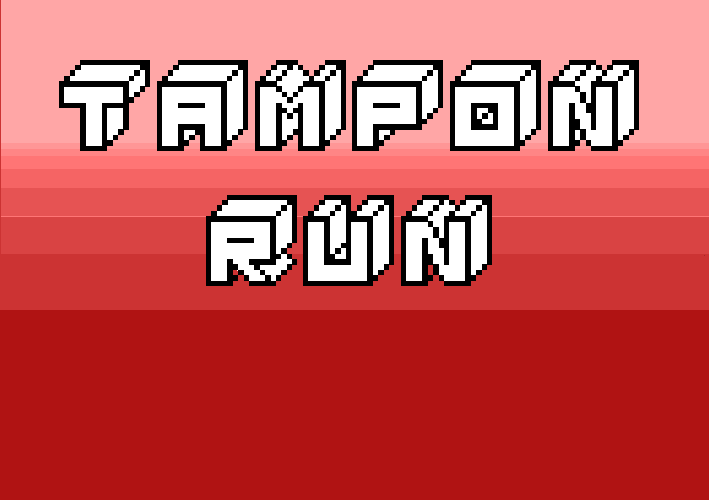
<style>
.page{position:relative;width:709px;height:500px;background:#b01313}
.page>*{position:absolute;margin:0}
.t1{font:172px/135px "3D-Thirteen-Pixel-Fonts";color:#000000}
</style>
<div class="page">
<p class="t1" style="left:59px;top:60px;width:580px;height:226px;text-align:center">TAMPON<br>RUN</p>
</div>
